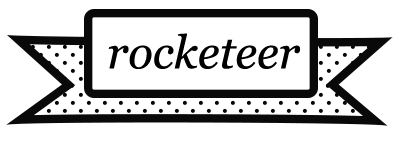
<style>
.page{position:relative;width:400px;height:150px;background:#ffffff}
.page>*{position:absolute;margin:0}
.t1{font:45.8px "Georgia-Italic";color:#000000}
</style>
<div class="page">
<p class="t1" style="left:108px;top:33px;width:192px;height:36px">rocketeer</p>
</div>
